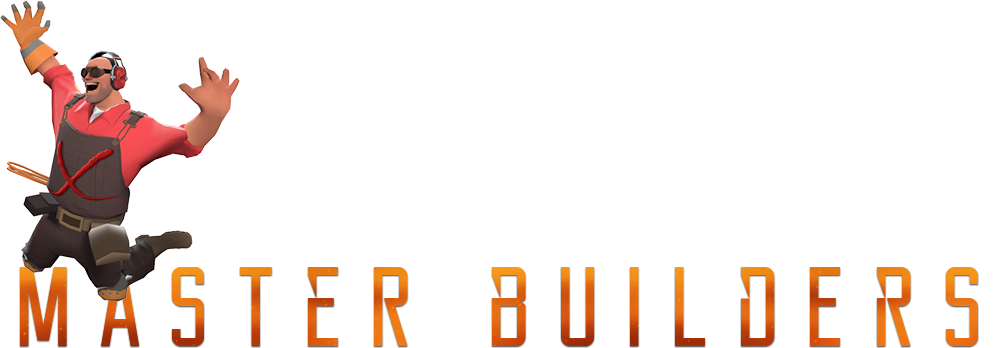
<style>
.page{position:relative;width:998px;height:348px;background:#ffffff}
.page>*{position:absolute;margin:0}
.t1{font:113px "Reckoner";letter-spacing:0.24em;scale:1.05 1}
</style>
<div class="page">
<p class="t1" style="left:20px;top:267px;width:958px;height:79px">mAsteR buildErs</p>
</div>
